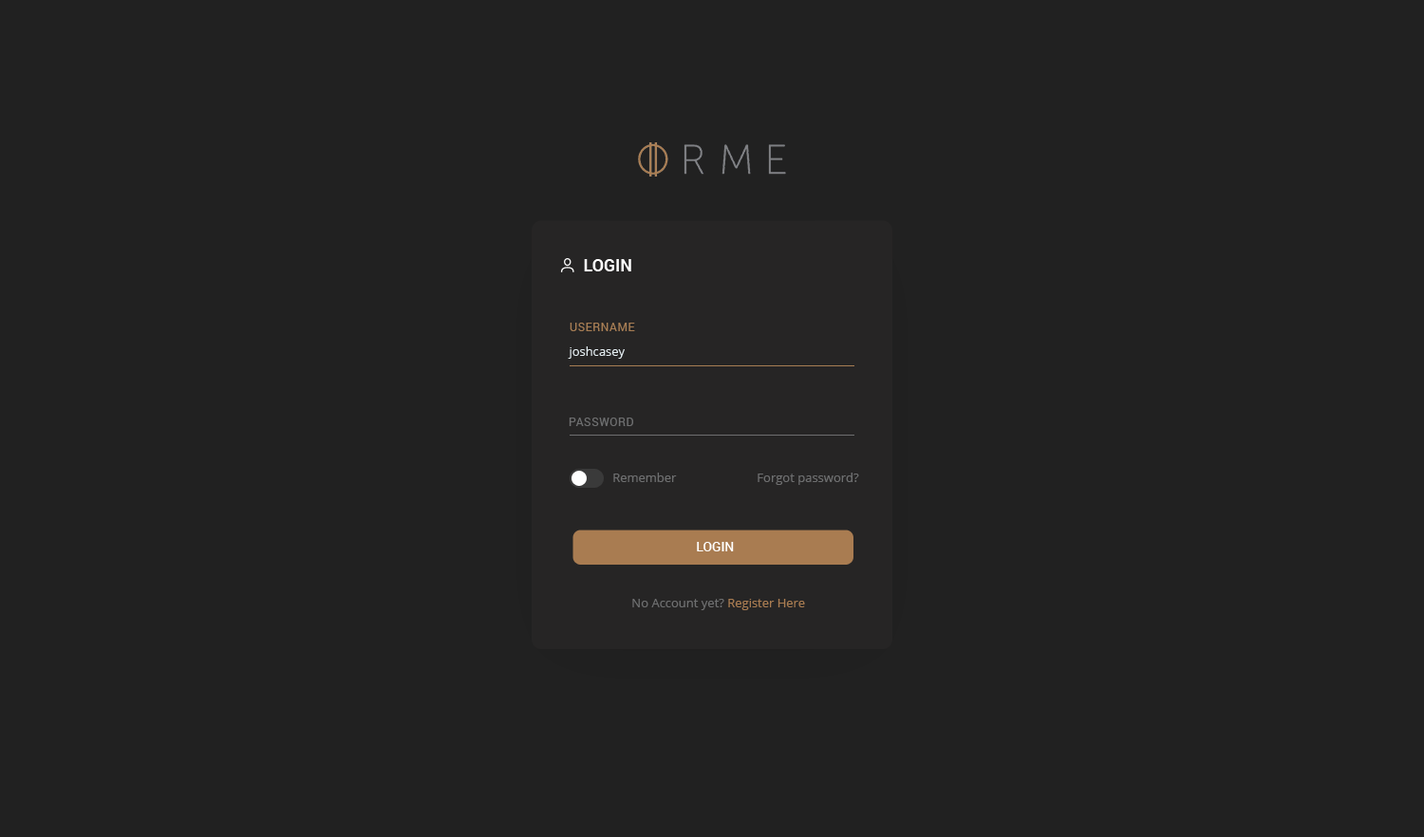
<style>
.page{position:relative;width:1424px;height:837px;background:#212121}
.page>*{position:absolute;margin:0}
.t1{font:17.1px "Roboto-Bold";color:#ffffff;text-transform:uppercase}
.t2{font:11.4px "Roboto-Regular";letter-spacing:0.05em;color:#a87e54;text-transform:uppercase}
.t3{font:12.3px "OpenSans";color:#e2ebef}
.t4{font:11.4px "Roboto-Regular";letter-spacing:0.05em;color:#6e6f70;text-transform:uppercase}
.t5{font:12.3px "OpenSans";color:#6e6f70}
.t6{font:13.3px "Roboto-Medium";color:#ffffff;text-transform:uppercase}
.t7{font:12.3px "OpenSans";color:#a97c51}
</style>
<div class="page">
<p class="t1" style="left:584px;top:259px;width:47px;height:13px">Login</p>
<p class="t2" style="left:570px;top:323px;width:65px;height:8px">Username</p>
<p class="t3" style="left:568px;top:347px;width:57px;height:12px">joshcasey</p>
<p class="t4" style="left:569px;top:418px;width:64px;height:8px">password</p>
<p class="t5" style="left:613px;top:473px;width:64px;height:9px">Remember</p>
<p class="t5" style="left:758px;top:473px;width:101px;height:12px">Forgot password?</p>
<p class="t6" style="left:697px;top:542px;width:37px;height:10px">Login</p>
<p class="t5" style="left:632px;top:599px;width:173px;height:11px">No Account yet? <span class="t7">Register Here</span></p>
</div>
